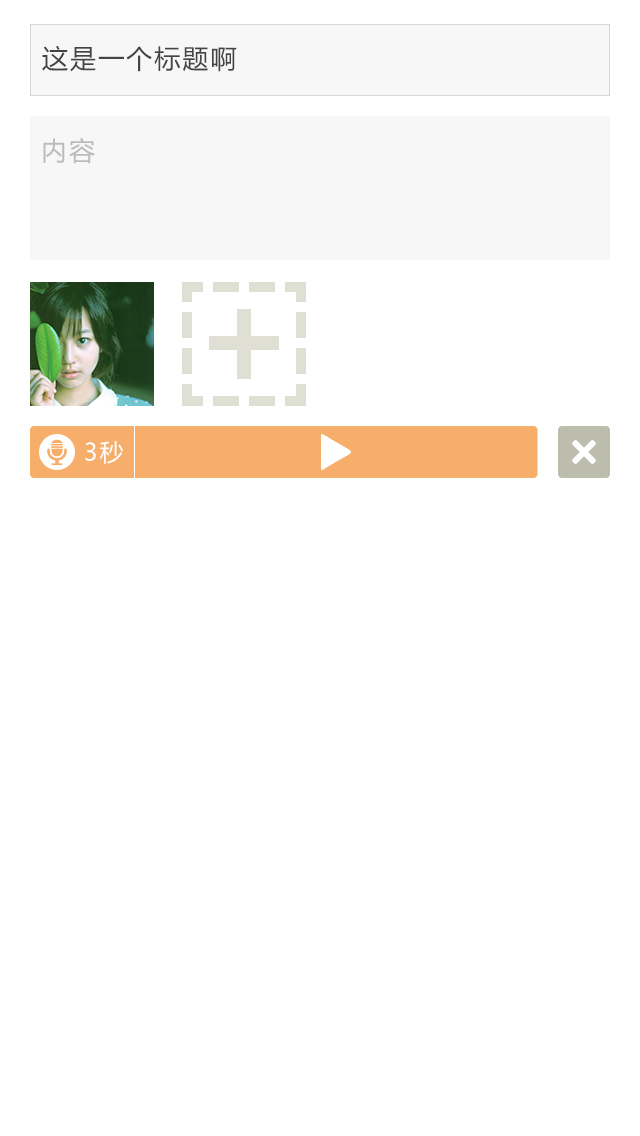
<style>
.page{position:relative;width:640px;height:1136px;background:#ffffff}
.page>*{position:absolute;margin:0}
.t1{font:26px "MicrosoftYaHei";letter-spacing:0.08em;color:#444444}
.t2{font:26px "MicrosoftYaHei";letter-spacing:0.08em;color:#bbbbbb}
.t3{font:24px "MicrosoftYaHei";letter-spacing:0.08em;color:#ffffff}
</style>
<div class="page">
<p class="t1" style="left:42px;top:45px;width:195px;height:27px">这是一个标题啊</p>
<p class="t2" style="left:43px;top:138px;width:52px;height:26px">内容</p>
<p class="t3" style="left:85px;top:441px;width:39px;height:23px">3秒</p>
</div>
